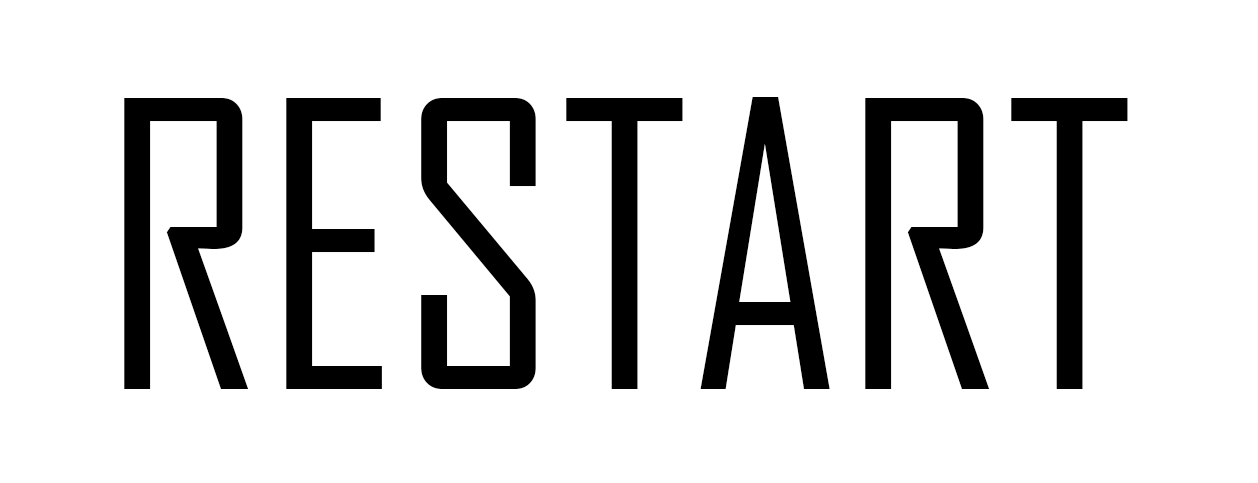
<style>
.page{position:relative;width:1258px;height:483px;background:#ffffff}
.page>*{position:absolute;margin:0}
.t1{font:381px "AgencyFB-Reg";color:#000000}
</style>
<div class="page">
<p class="t1" style="left:124px;top:97px;width:1004px;height:292px">RESTART</p>
</div>
